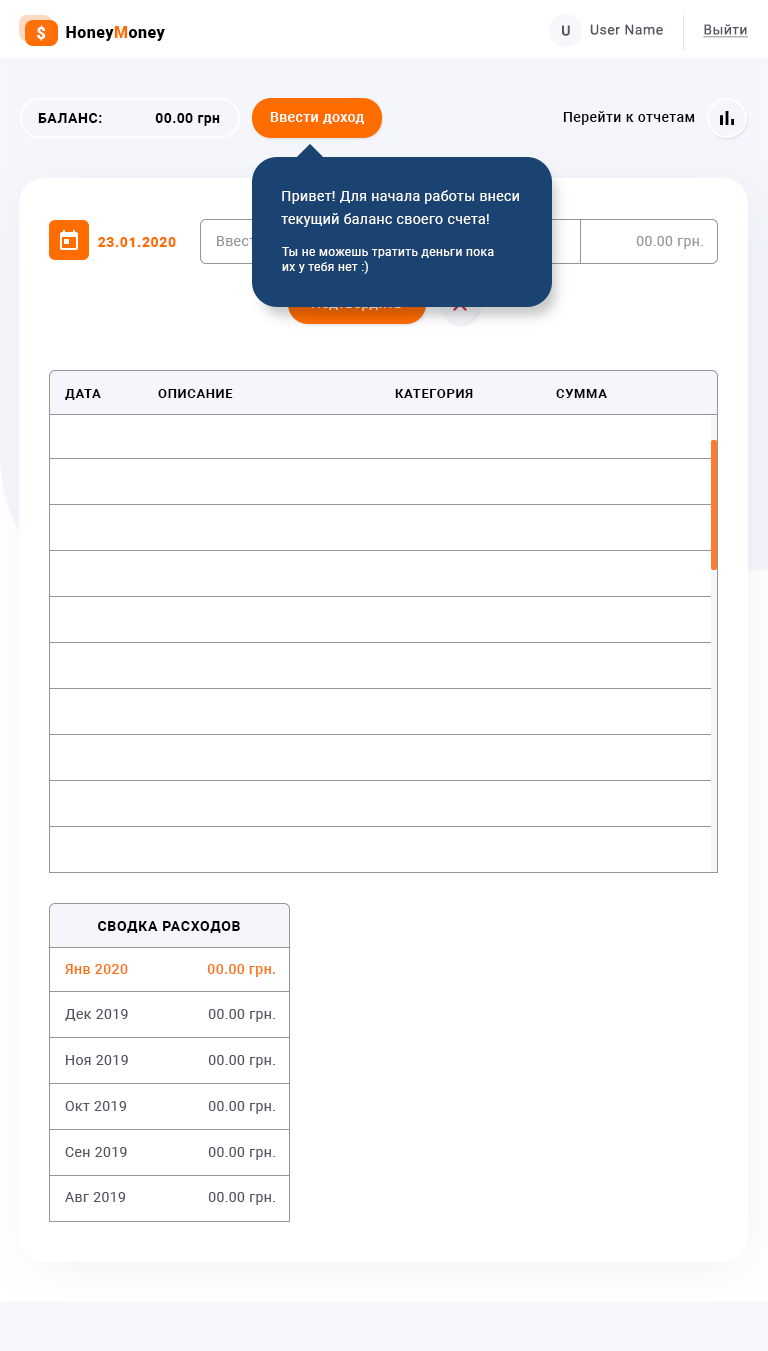
<style>
.page{position:relative;width:768px;height:1351px;background:#ffffff}
.page>*{position:absolute;margin:0}
.t1{font:16px "Roboto-Black";letter-spacing:0.03em;color:#ffffff}
.t2{font:16px "Roboto-Black";letter-spacing:0.03em;color:#000000}
.t3{font:16px "Roboto-Black";letter-spacing:0.03em;color:#ff6c00}
.t4{font:14px "Roboto-Medium";letter-spacing:0.035em;color:#52555f}
.t5{font:14px "Roboto-Regular";letter-spacing:0.035em;color:#52555f}
.t6{font:14px "Roboto-Regular";letter-spacing:0.03em;color:#52555f;text-decoration:underline}
.t7{font:14px "Roboto-Bold";letter-spacing:0.04em;color:#000000;text-transform:uppercase}
.t8{font:14px "Roboto-Bold";letter-spacing:0.03em;color:#000000}
.t9{font:14px "Roboto-Medium";letter-spacing:0.03em;color:#ffffff}
.t10{font:14px "Roboto-Medium";letter-spacing:0.03em;color:#000000}
.t11{font:14px/23px "Roboto-Regular";letter-spacing:0.03em;color:#ffffff}
.t12{font:14px "Roboto-Black";letter-spacing:0.04em;color:#ff6c00}
.t13{font:14px "Roboto-Regular";letter-spacing:0.03em;color:#959595}
.t14{font:12px/15px "Roboto-Regular";letter-spacing:0.03em;color:#ffffff}
.t15{font:14px "Roboto-Regular";letter-spacing:0.03em;color:#1b4371}
.t16{font:13px "Roboto-Bold";letter-spacing:0.05em;color:#000000;text-transform:uppercase}
.t17{font:14px "Roboto-Bold";letter-spacing:0.05em;color:#000000;text-transform:uppercase}
.t18{font:14px "Roboto-Medium";letter-spacing:0.03em;color:#fe710d}
.t19{font:14px "Roboto-Regular";letter-spacing:0.03em;color:#52555f}
</style>
<div class="page">
<p class="t1" style="left:37px;top:25px;width:9px;height:16px">$</p>
<p class="t2" style="left:66px;top:26px;width:99px;height:15px">Honey<span class="t3">M</span>oney</p>
<p class="t4" style="left:562px;top:25px;width:8px;height:11px">U</p>
<p class="t5" style="left:590px;top:24px;width:73px;height:11px">User Name</p>
<p class="t6" style="left:703px;top:24px;width:45px;height:14px">Выйти</p>
<p class="t7" style="left:38px;top:113px;width:64px;height:10px">баланс:</p>
<p class="t8" style="left:155px;top:113px;width:65px;height:13px">00.00 грн</p>
<p class="t9" style="left:270px;top:112px;width:94px;height:12px">Ввести доход</p>
<p class="t10" style="left:563px;top:111px;width:132px;height:14px">Перейти к отчетам</p>
<p class="t11" style="left:281px;top:190px;width:238px;height:37px">Привет! Для начала работы внеси текущий баланс своего счета!</p>
<p class="t12" style="left:98px;top:237px;width:78px;height:10px">23.01.2020</p>
<p class="t13" style="left:636px;top:236px;width:67px;height:13px">00.00 грн.</p>
<p class="t14" style="left:282px;top:247px;width:212px;height:27px">Ты не можешь тратить деньги пока <br>их у тебя нет :)</p>
<p class="t15" style="left:312px;top:298px;width:90px;height:13px">Подтвердить</p>
<p class="t16" style="left:65px;top:389px;width:36px;height:11px">Дата</p>
<p class="t16" style="left:158px;top:389px;width:75px;height:9px">Описание</p>
<p class="t16" style="left:395px;top:389px;width:78px;height:9px">Категория</p>
<p class="t16" style="left:556px;top:389px;width:51px;height:9px">Сумма</p>
<p class="t17" style="left:98px;top:921px;width:142px;height:12px">Сводка расходов</p>
<p class="t18" style="left:65px;top:964px;width:63px;height:10px">Янв 2020</p>
<p class="t18" style="left:207px;top:964px;width:68px;height:13px">00.00 грн.</p>
<p class="t19" style="left:65px;top:1009px;width:63px;height:12px">Дек 2019</p>
<p class="t19" style="left:208px;top:1009px;width:67px;height:13px">00.00 грн.</p>
<p class="t19" style="left:66px;top:1055px;width:62px;height:10px">Ноя 2019</p>
<p class="t19" style="left:208px;top:1055px;width:67px;height:13px">00.00 грн.</p>
<p class="t19" style="left:65px;top:1101px;width:62px;height:10px">Окт 2019</p>
<p class="t19" style="left:208px;top:1101px;width:67px;height:13px">00.00 грн.</p>
<p class="t19" style="left:65px;top:1147px;width:62px;height:10px">Сен 2019</p>
<p class="t19" style="left:208px;top:1147px;width:67px;height:13px">00.00 грн.</p>
<p class="t19" style="left:65px;top:1192px;width:61px;height:10px">Авг 2019</p>
<p class="t19" style="left:208px;top:1192px;width:67px;height:13px">00.00 грн.</p>
</div>
